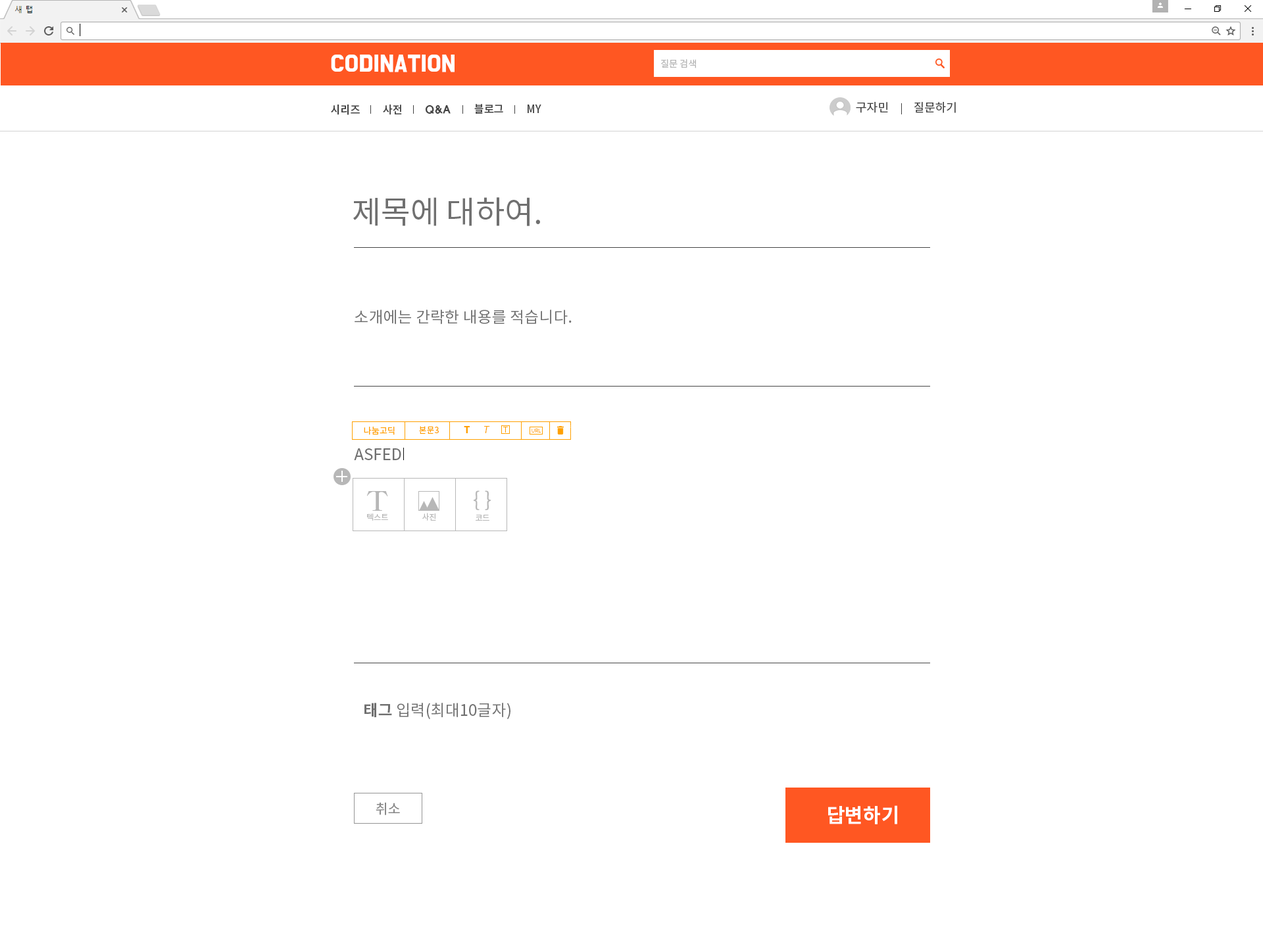
<style>
.page{position:relative;width:1263px;height:944px;background:#ffffff}
.page>*{position:absolute;margin:0}
.t1{font:19.7px "BMDoHyeon";color:#ffffff;font-weight:bold}
.t2{font:9.2px "NotoSansCJKkr-DemiLight";color:#b5b5b5}
.t3{font:11.8px "NotoSansCJKkr-Regular";color:#424242}
.t4{font:10.9px "NotoSansCJKkr-Medium";letter-spacing:-0.01em;color:#424242}
.t5{font:10.9px "HYwulB";letter-spacing:-0.025em;color:#424242}
.t6{font:31.6px "NotoSansCJKkr-Regular";color:#707070}
.t7{font:15.8px "NotoSansCJKkr-Regular";color:#707070}
.t8{font:8.7px "NotoSansCJKkr-Regular";color:#ffa000}
.t9{font:8.4px "NotoSansCJKkr-Regular";color:#ffa000}
.t10{font:9.6px "NotoSansCJKkr-Black";color:#ffa000}
.t11{font:9.6px "NotoSansCJKkr-Light";color:#ffa000;font-style:italic}
.t12{font:8.1px "NotoSansCJKkr-Light";color:#ffa000}
.t13{font:5.3px "NotoSansCJKkr-Light";color:#ffa000}
.t14{font:27px "HYmjrE";color:#b7b7b7}
.t15{font:20.4px "NotoSansCJKkr-Regular";color:#b7b7b7}
.t16{font:8.1px "NotoSansCJKkr-Regular";color:#b7b7b7}
.t17{font:15.8px "NotoSansCJKkr-Bold";color:#707070}
.t18{font:13.7px "NotoSansCJKkr-Regular";color:#898989}
.t19{font:19.7px "NotoSansCJKkr-Bold";color:#ffffff}
</style>
<div class="page">
<p class="t1" style="left:331px;top:55px;width:123px;height:17px">CODINATION</p>
<p class="t2" style="left:661px;top:59px;width:35px;height:9px">질문 검색</p>
<p class="t3" style="left:856px;top:102px;width:32px;height:11px">구자민</p>
<p class="t3" style="left:914px;top:102px;width:42px;height:11px">질문하기</p>
<p class="t4" style="left:331px;top:105px;width:29px;height:10px">시리즈</p>
<p class="t4" style="left:383px;top:105px;width:19px;height:10px">사전</p>
<p class="t5" style="left:425px;top:105px;width:25px;height:9px">Q&amp;A</p>
<p class="t4" style="left:474px;top:104px;width:29px;height:10px">블로그</p>
<p class="t4" style="left:527px;top:105px;width:14px;height:8px">MY</p>
<p class="t6" style="left:353px;top:197px;width:187px;height:29px">제목에 대하여.</p>
<p class="t7" style="left:354px;top:310px;width:217px;height:14px">소개에는 간략한 내용를 적습니다.</p>
<p class="t8" style="left:364px;top:427px;width:31px;height:8px">나눔고딕</p>
<p class="t9" style="left:419px;top:426px;width:20px;height:8px">본문3</p>
<p class="t10" style="left:464px;top:426px;width:6px;height:7px">T</p>
<p class="t11" style="left:484px;top:426px;width:6px;height:7px">T</p>
<p class="t12" style="left:503px;top:427px;width:5px;height:6px">T</p>
<p class="t13" style="left:531px;top:429px;width:10px;height:4px">URL</p>
<p class="t7" style="left:354px;top:449px;width:47px;height:11px">ASFED</p>
<p class="t14" style="left:366px;top:491px;width:22px;height:20px">T</p>
<p class="t15" style="left:474px;top:491px;width:17px;height:19px">{ }</p>
<p class="t16" style="left:367px;top:514px;width:21px;height:7px">텍스트</p>
<p class="t16" style="left:422px;top:513px;width:14px;height:8px">사진</p>
<p class="t16" style="left:475px;top:515px;width:14px;height:6px">코드</p>
<p class="t7" style="left:364px;top:703px;width:146px;height:16px"><span class="t17">태그</span> 입력(최대10글자)</p>
<p class="t18" style="left:376px;top:802px;width:24px;height:13px">취소</p>
<p class="t19" style="left:828px;top:806px;width:69px;height:19px">답변하기</p>
</div>
